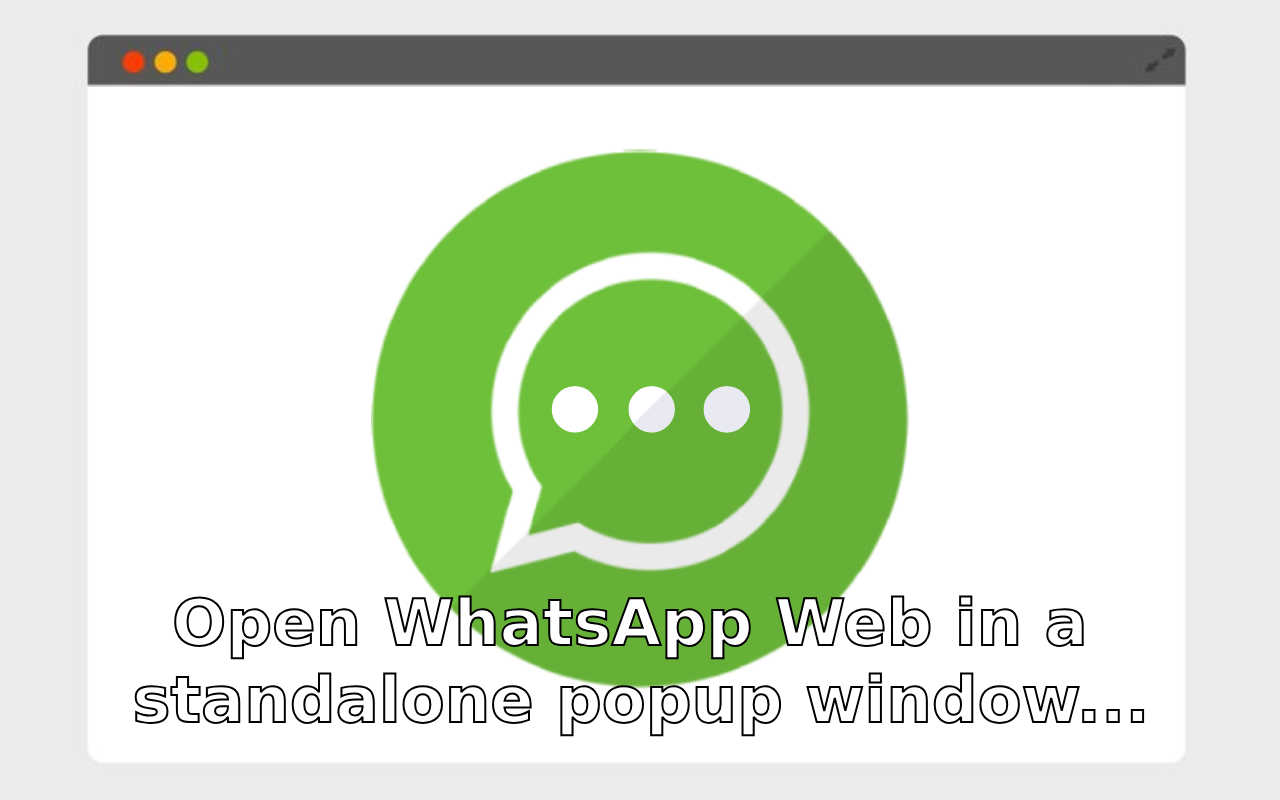
<style>
.page{position:relative;width:1280px;height:800px;background:#ffffff}
.page>*{position:absolute;margin:0}
.t1{font:64px "DejaVuSans-Bold";color:#ffffff}
</style>
<div class="page">
<p class="t1" style="left:134px;top:595px;width:1011px;height:142px;text-align:center">Open WhatsApp Web in a <br>standalone popup window...</p>
</div>
